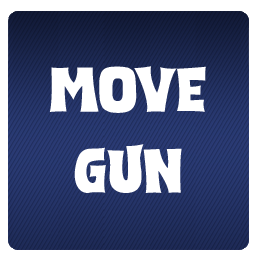
<style>
.page{position:relative;width:256px;height:256px;background:#ffffff}
.page>*{position:absolute;margin:0}
.t1{font:64.4px "SCARYAndSPICYRegular";color:#ffffff}
.t2{font:63.8px "SCARYAndSPICYRegular";color:#ffffff}
</style>
<div class="page">
<p class="t1" style="left:53px;top:62px;width:150px;height:52px">Next</p>
<p class="t1" style="left:53px;top:62px;width:150px;height:52px">Next</p>
<p class="t1" style="left:49px;top:66px;width:157px;height:47px">Move</p>
<p class="t2" style="left:74px;top:144px;width:108px;height:49px">GUN</p>
<p class="t2" style="left:74px;top:144px;width:108px;height:49px">GUN</p>
<p class="t2" style="left:74px;top:144px;width:108px;height:49px">GUN</p>
</div>
